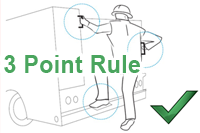
<style>
.page{position:relative;width:200px;height:133px;background:#ffffff}
.page>*{position:absolute;margin:0}
.t1{font:24.7px "Arial-BoldMT";letter-spacing:0.01em;color:#4aa55e;scale:0.94 1}
</style>
<div class="page">
<p class="t1" style="left:4px;top:55px;width:136px;height:18px">3 Point Rule</p>
</div>
